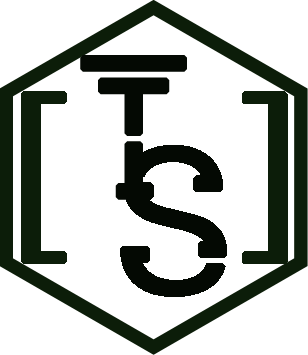
<style>
.page{position:relative;width:308px;height:355px;background:#ffffff}
.page>*{position:absolute;margin:0}
.t1{font:190px "JAKARTA";letter-spacing:0.1em;color:#040903;font-variant:small-caps;font-weight:bold}
.t2{font:190px "TimesNewRomanPSMT";letter-spacing:0.1em;color:#0c1d09;font-variant:small-caps;font-weight:bold}
</style>
<div class="page">
<p class="t1" style="left:80px;top:55px;width:107px;height:145px">T</p>
<p class="t2" style="left:21px;top:91px;width:267px;height:173px">[  ]</p>
<p class="t1" style="left:120px;top:145px;width:107px;height:152px">S</p>
</div>
